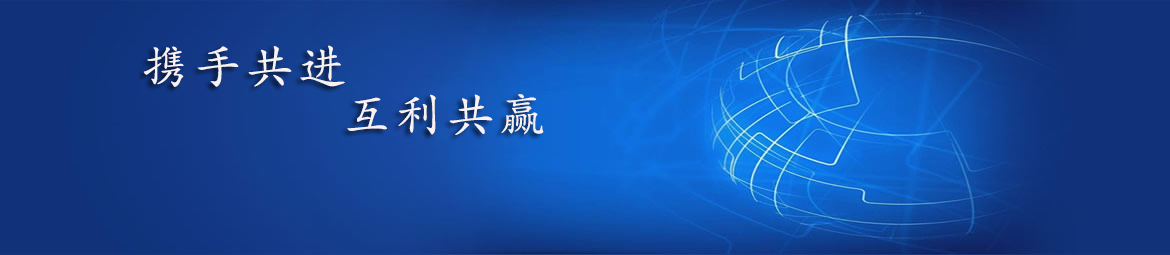
<style>
.page{position:relative;width:1170px;height:255px}
.page>*{position:absolute;margin:0}
.t1{font:48px "STKaiti";letter-spacing:0.08em;color:#f8f3f3}
.t2{font:48px "STKaiti";letter-spacing:0.08em;color:#f8f1f1}
</style>
<div class="page">
<p class="t1" style="left:143px;top:45px;width:202px;height:42px">携手共进</p>
<p class="t2" style="left:347px;top:94px;width:197px;height:41px">互利共赢</p>
</div>
